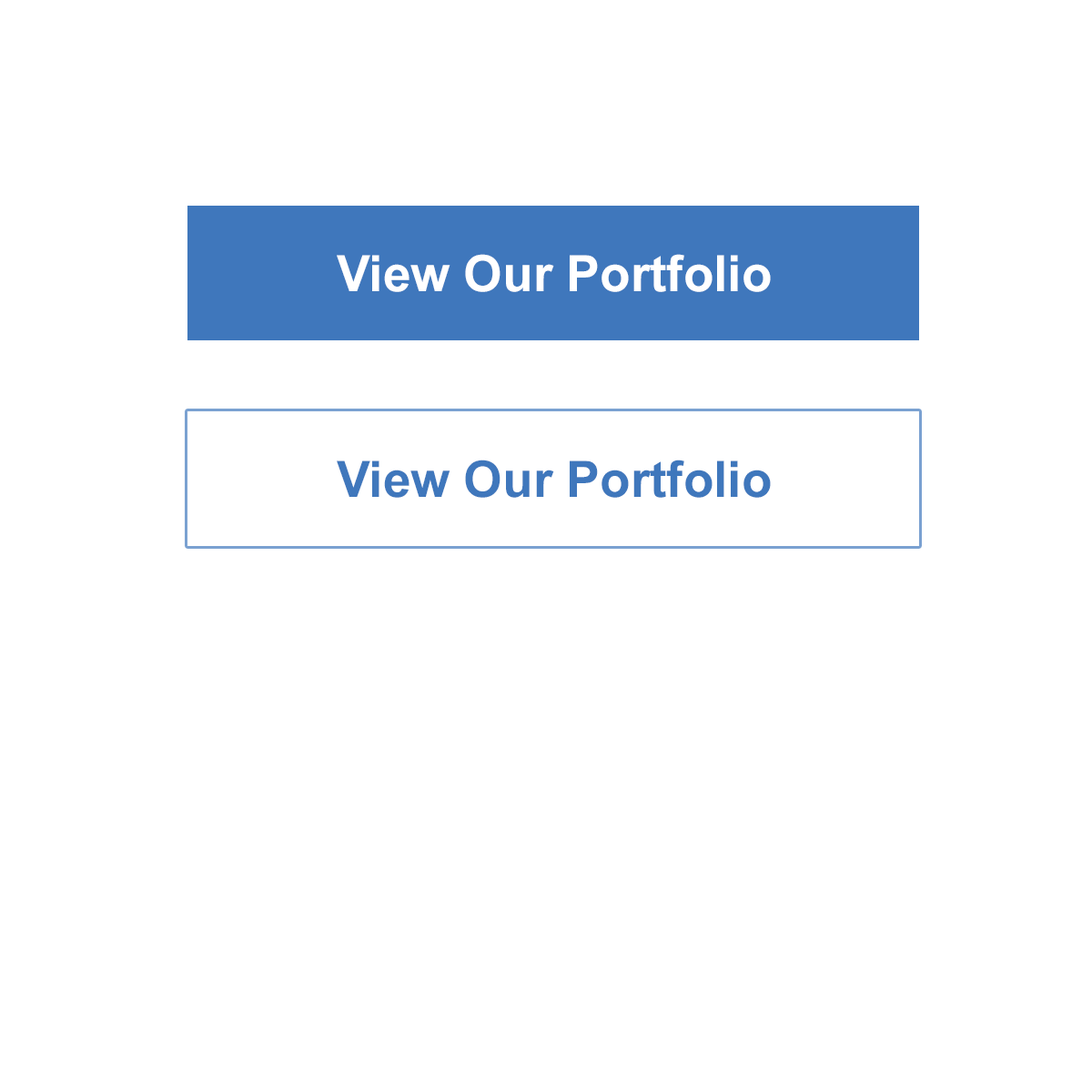
<style>
.page{position:relative;width:1092px;height:1092px;background:#ffffff}
.page>*{position:absolute;margin:0}
.t1{font:50px "Arial-BoldMT";color:#ffffff}
.t2{font:50px "Arial-BoldMT";color:#3f77bc}
</style>
<div class="page">
<p class="t1" style="left:337px;top:254px;width:434px;height:38px">View Our Portfolio</p>
<p class="t2" style="left:337px;top:460px;width:434px;height:38px">View Our Portfolio</p>
</div>
